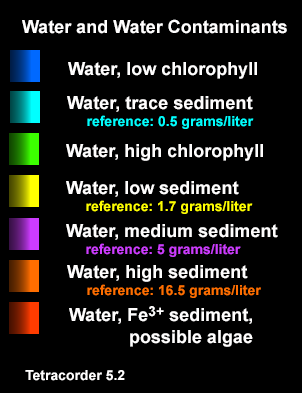
<style>
.page{position:relative;width:302px;height:393px;background:#000000}
.page>*{position:absolute;margin:0}
.t1{font:18px "Arial-BoldMT";color:#fffefe}
.t2{font:14px "Arial-BoldMT";color:#00ffff}
.t3{font:14px "Arial-BoldMT";color:#ffff00}
.t4{font:14px "Arial-BoldMT";color:#cd3cff}
.t5{font:14px "Arial-BoldMT";color:#ff6e00}
.t6{font:14px "Arial-BoldMT";color:#fffefe}
</style>
<div class="page">
<p class="t1" style="left:22px;top:19px;width:265px;height:15px">Water and Water Contaminants</p>
<p class="t1" style="left:68px;top:62px;width:189px;height:17px">Water, low chlorophyll</p>
<p class="t2" style="left:67px;top:96px;width:187px;height:33px"><span class="t1">Water, trace sediment<br>     </span>reference: 0.5 grams/liter</p>
<p class="t1" style="left:66px;top:144px;width:197px;height:17px">Water, high chlorophyll</p>
<p class="t3" style="left:66px;top:181px;width:187px;height:33px"><span class="t1">Water, low sediment<br>     </span>reference: 1.7 grams/liter</p>
<p class="t4" style="left:66px;top:224px;width:212px;height:33px"><span class="t1">Water, medium sediment<br>     </span>reference: 5 grams/liter</p>
<p class="t5" style="left:67px;top:265px;width:194px;height:33px"><span class="t1">Water, high sediment<br>     </span>reference: 16.5 grams/liter</p>
<p class="t1" style="left:69px;top:306px;width:184px;height:41px">Water, Fe<span class="t6">3+</span> sediment,<br>            possible algae</p>
<p class="t6" style="left:25px;top:370px;width:100px;height:11px">Tetracorder 5.2</p>
</div>
